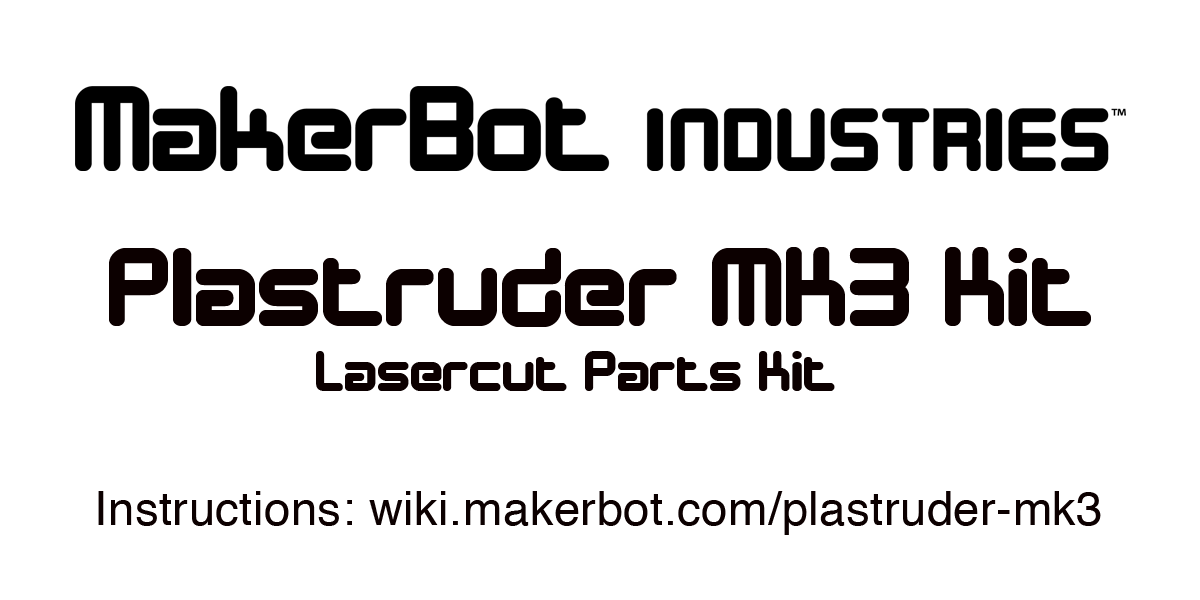
<style>
.page{position:relative;width:1200px;height:600px;background:#ffffff}
.page>*{position:absolute;margin:0}
.t1{font:114.5px "DesignerBlock";letter-spacing:0.01em;color:#0c0000}
.t2{font:59.1px "DesignerBlock";letter-spacing:0.01em;color:#0c0000}
.t3{font:47.2px "Helvetica";letter-spacing:0.01em;color:#0c0000}
</style>
<div class="page">
<p class="t1" style="left:109px;top:247px;width:982px;height:80px">Plastruder MK3 Kit</p>
<p class="t2" style="left:316px;top:351px;width:519px;height:40px">Lasercut Parts Kit</p>
<p class="t3" style="left:98px;top:491px;width:1003px;height:44px">Instructions: wiki.makerbot.com/plastruder-mk3</p>
</div>
